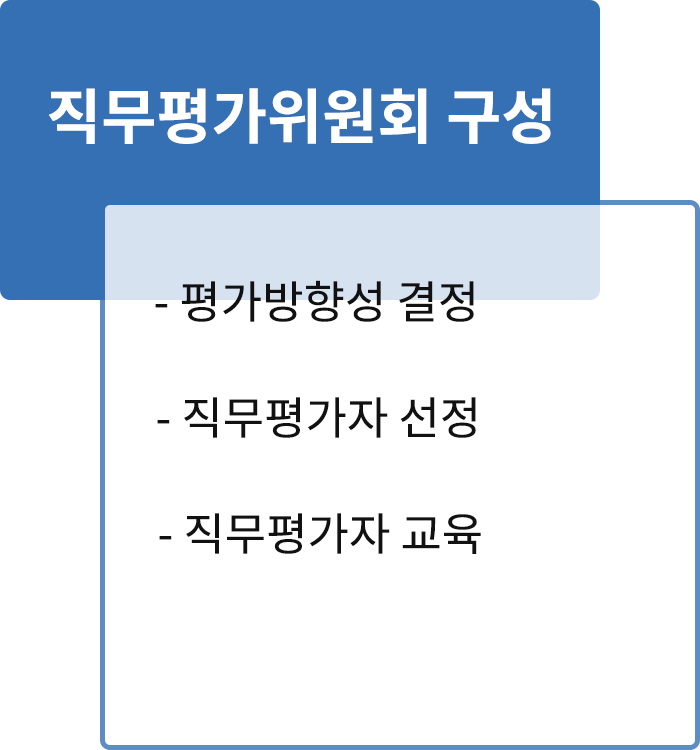
<style>
.page{position:relative;width:700px;height:750px;background:#ffffff}
.page>*{position:absolute;margin:0}
.t1{font:60px "NotoSansCJKkr-Bold";color:#ffffff}
.t2{font:45px "NotoSansCJKkr-Regular";color:#111111}
</style>
<div class="page">
<p class="t1" style="left:48px;top:88px;width:503px;height:56px">직무평가위원회 구성</p>
<p class="t2" style="left:155px;top:280px;width:319px;height:42px">- 평가방향성 결정</p>
<p class="t2" style="left:157px;top:397px;width:319px;height:41px">- 직무평가자 선정</p>
<p class="t2" style="left:159px;top:513px;width:322px;height:41px">- 직무평가자 교육</p>
</div>
